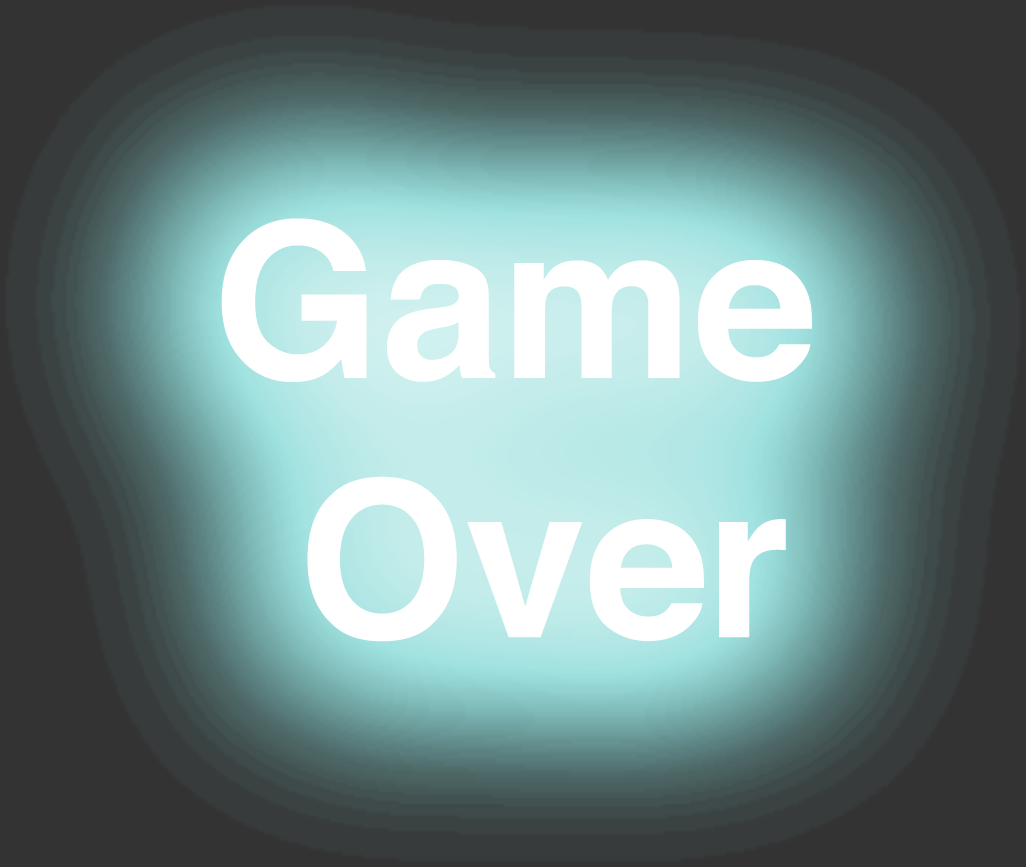
<style>
.page{position:relative;width:1026px;height:867px}
.page>*{position:absolute;margin:0}
.t1{font:216px "Helvetica-Bold";color:#ffffff}
</style>
<div class="page">
<p class="t1" style="left:221px;top:218px;width:591px;height:424px;text-align:center">Game <br>Over</p>
</div>
